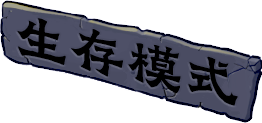
<style>
.page{position:relative;width:262px;height:123px;background:#ffffff}
.page>*{position:absolute;margin:0}
.t1{font:59.3px "GraveBustedStoneLishuSCRoughlyC";color:#000000;scale:1.09 1}
</style>
<div class="page">
<p class="t1" style="left:17px;top:18px;width:221px;height:88px;rotate:13deg">生存模式</p>
</div>
